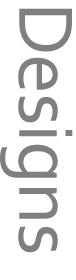
<style>
.page{position:relative;width:76px;height:280px;background:#ffffff}
.page>*{position:absolute;margin:0}
.t1{font:80.8px "Corbel";letter-spacing:-0.02em;color:#7f7f7f}
</style>
<div class="page">
<p class="t1" style="left:0px;top:8px;width:73px;height:245px;rotate:90deg">Designs</p>
</div>
